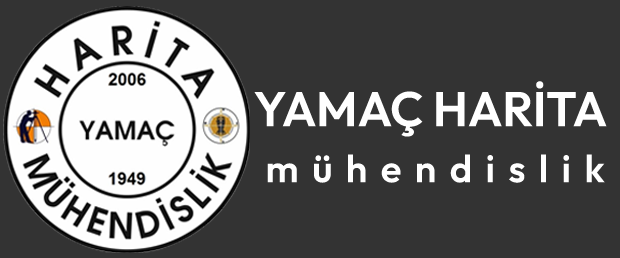
<style>
.page{position:relative;width:620px;height:258px;background:#333333}
.page>*{position:absolute;margin:0}
.t1{font:48.7px "Outfit-SemiBold";color:#ffffff}
.t2{font:38.3px "Outfit-SemiBold";letter-spacing:0.35em;color:#ffffff}
</style>
<div class="page">
<p class="t1" style="left:254px;top:81px;width:353px;height:56px">YAMAÇ HARİTA</p>
<p class="t2" style="left:267px;top:154px;width:338px;height:29px">mühendislik</p>
</div>
